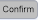
<style>
.page{position:relative;width:38px;height:20px;background:#bfbfbf}
.page>*{position:absolute;margin:0}
.t1{font:9px "ArialMT";color:#000000}
</style>
<div class="page">
<p class="t1" style="left:3px;top:5px;width:31px;height:8px">Confirm</p>
</div>
